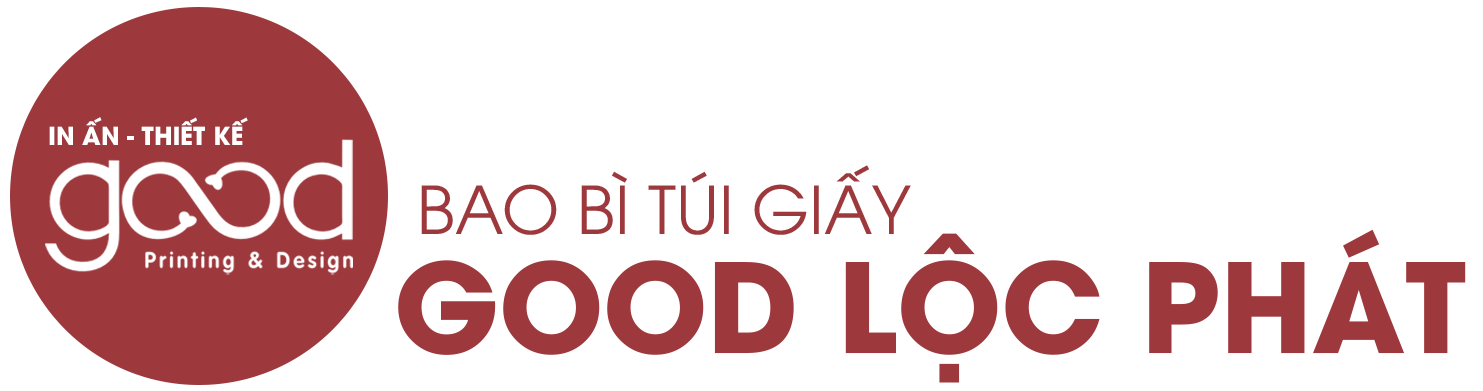
<style>
.page{position:relative;width:1483px;height:391px;background:#ffffff}
.page>*{position:absolute;margin:0}
.t1{font:24.6px "UTMAvoBold";color:#ffffff}
.t2{font:65.6px "UTM-Avo";color:#9d383c}
.t3{font:122.9px "UTMAvoBold";color:#9d383c}
</style>
<div class="page">
<p class="t1" style="left:49px;top:117px;width:199px;height:28px">IN ẤN - THIẾT KẾ</p>
<p class="t2" style="left:421px;top:165px;width:490px;height:70px">BAO BÌ TÚI GIẤY</p>
<p class="t3" style="left:398px;top:229px;width:1068px;height:154px">GOOD LỘC PHÁT</p>
</div>
